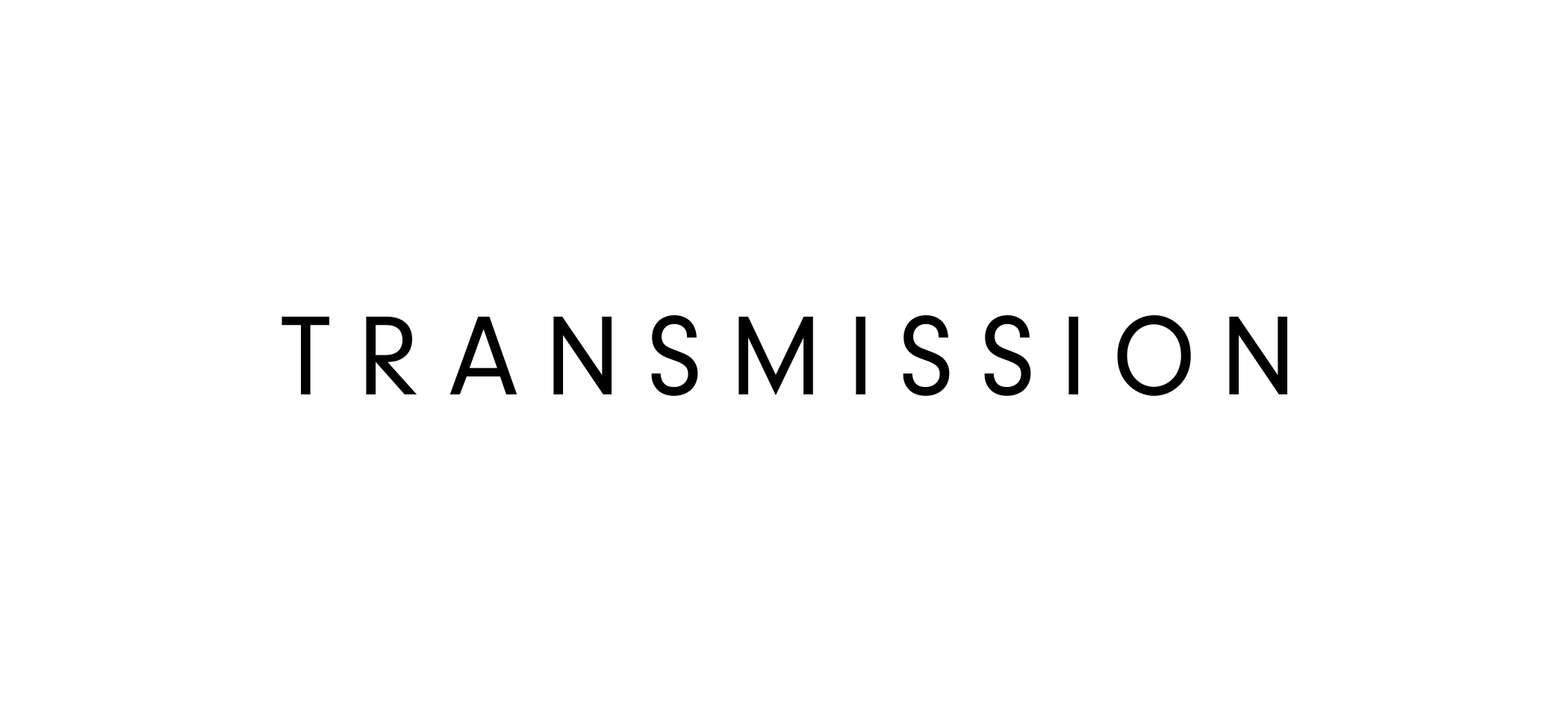
<style>
.page{position:relative;width:1568px;height:726px;background:#ffffff}
.page>*{position:absolute;margin:0}
.t1{font:116.5px "NeuzeitGroteskW01-Regular";letter-spacing:0.22em;color:#000000;scale:0.96 1}
.t2{font:116.5px "NeuzeitGroteskW01-Regular";letter-spacing:0.24em;color:#000000;scale:0.96 1}
</style>
<div class="page">
<p class="t1" style="left:281px;top:315px;width:1007px;height:81px"><span class="t2">TRANS</span>MISSIO<span class="t2">N</span></p>
</div>
